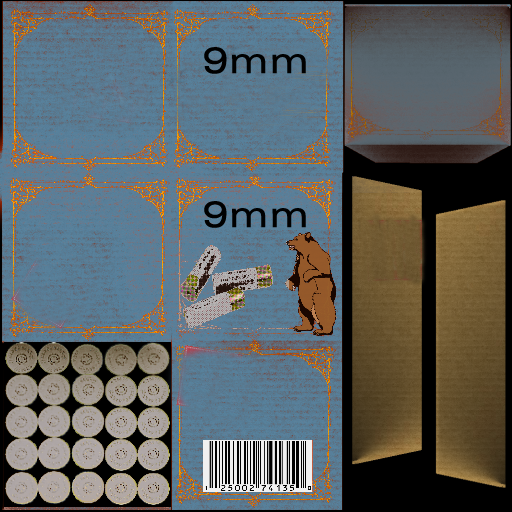
<style>
.page{position:relative;width:512px;height:512px}
.page>*{position:absolute;margin:0}
.t1{font:36px "ZurichBT-RomanExtended";color:#000000;font-weight:bold}
</style>
<div class="page">
<p class="t1" style="left:204px;top:47px;width:102px;height:27px">9mm</p>
<p class="t1" style="left:204px;top:201px;width:102px;height:27px">9mm</p>
</div>
